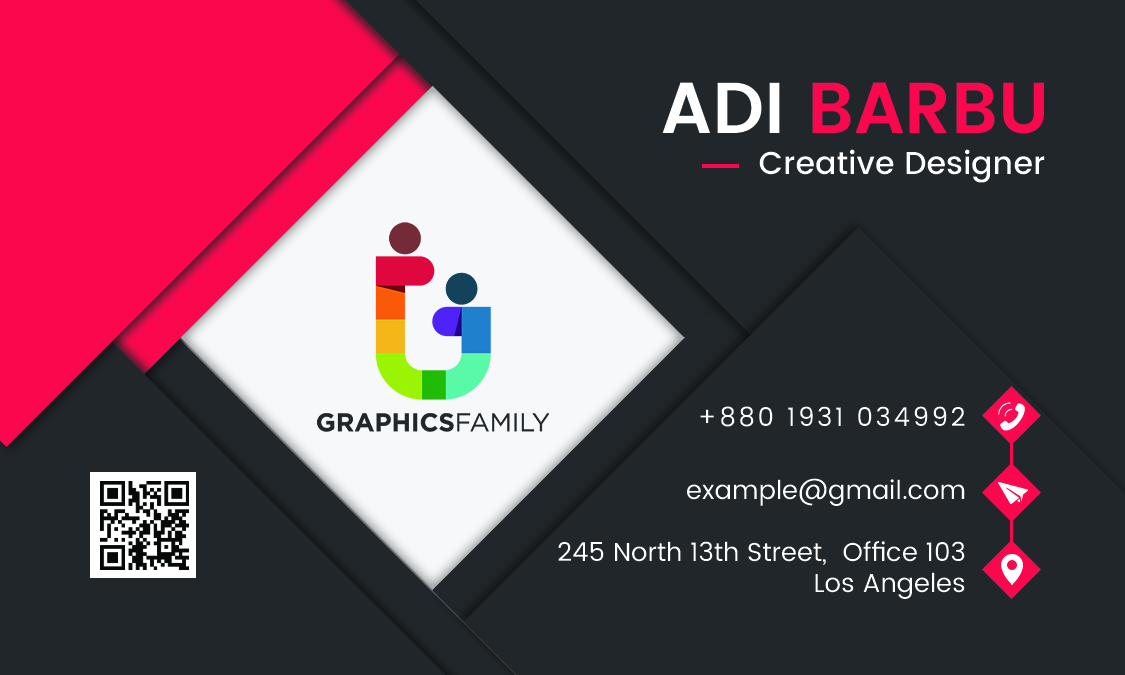
<style>
.page{position:relative;width:1125px;height:675px;background:#21262a}
.page>*{position:absolute;margin:0}
.t1{font:72.1px "Poppins-SemiBold";color:#fb074e;text-transform:uppercase}
.t2{font:72.1px "Poppins-SemiBold";color:#ffffff;text-transform:uppercase}
.t3{font:31.7px "Poppins-Medium";color:#ffffff}
.t4{font:26px "Poppins-Regular";letter-spacing:0.1em;color:#ffffff}
.t5{font:26px "Poppins-Regular";color:#ffffff}
</style>
<div class="page">
<p class="t1" style="left:662px;top:82px;width:382px;height:52px"><span class="t2">Adi</span> barbu</p>
<p class="t3" style="left:759px;top:149px;width:286px;height:34px">Creative Designer</p>
<p class="t4" style="left:700px;top:406px;width:265px;height:21px">+880 1931 034992</p>
<p class="t5" style="left:687px;top:478px;width:278px;height:28px">example@gmail.com</p>
<p class="t5" style="left:558px;top:541px;width:407px;height:58px;text-align:right">245 North 13th Street,  Office 103<br>Los Angeles</p>
</div>
